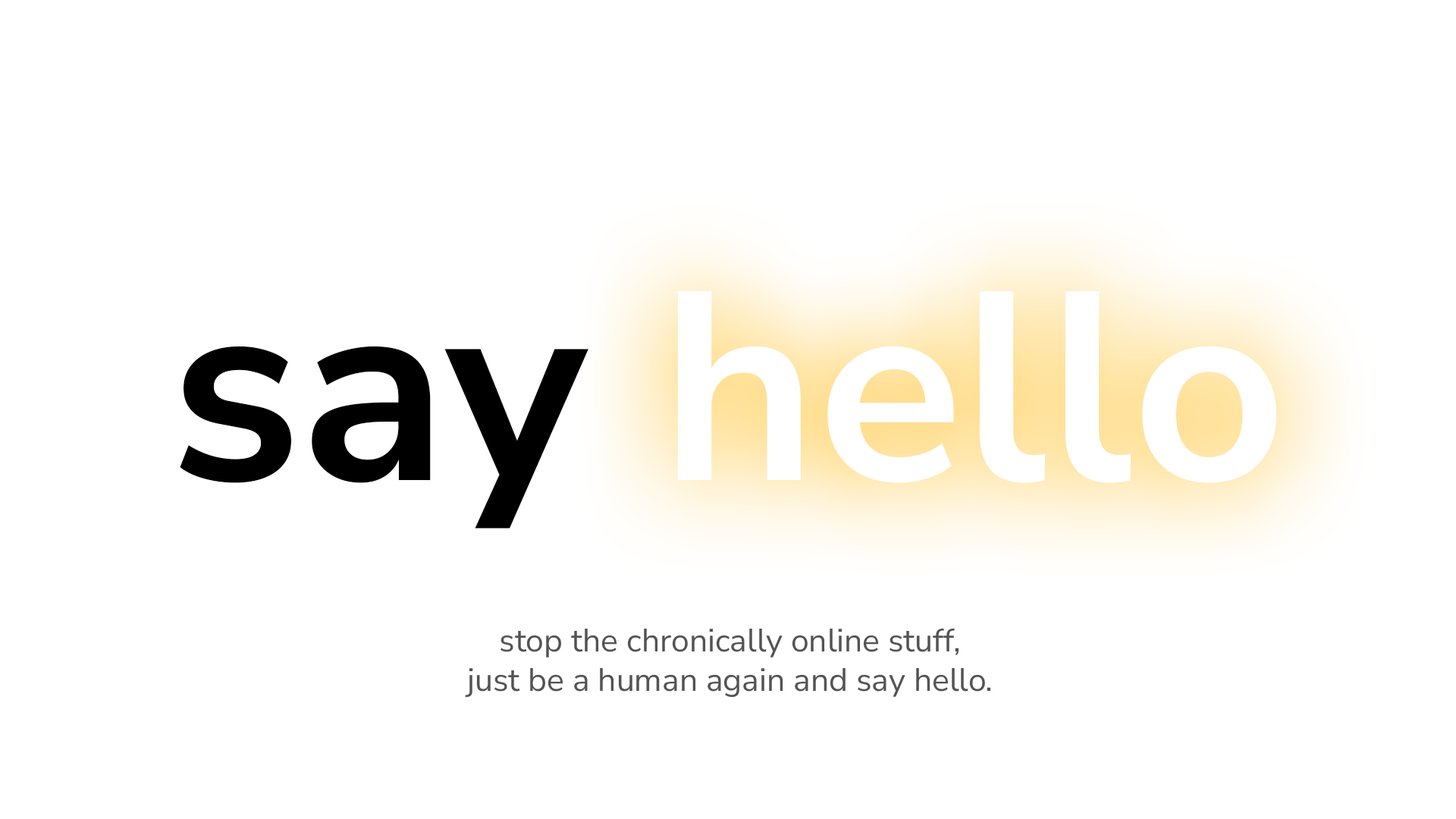
<style>
.page{position:relative;width:1456px;height:819px;background:#ffffff}
.page>*{position:absolute;margin:0}
.t1{font:267.8px "NunitoSans-Bold";color:#ffffff}
.t2{font:267.8px "NunitoSans-Bold";color:#000000}
.t3{font:32.4px "NunitoSans-Regular";color:#535353}
</style>
<div class="page">
<p class="t1" style="left:677px;top:291px;width:600px;height:192px">hello</p>
<p class="t2" style="left:180px;top:346px;width:408px;height:183px">say</p>
<p class="t3" style="left:465px;top:628px;width:526px;height:70px;text-align:center">stop the chronically online stuff,<br>just be a human again and say hello.</p>
</div>
